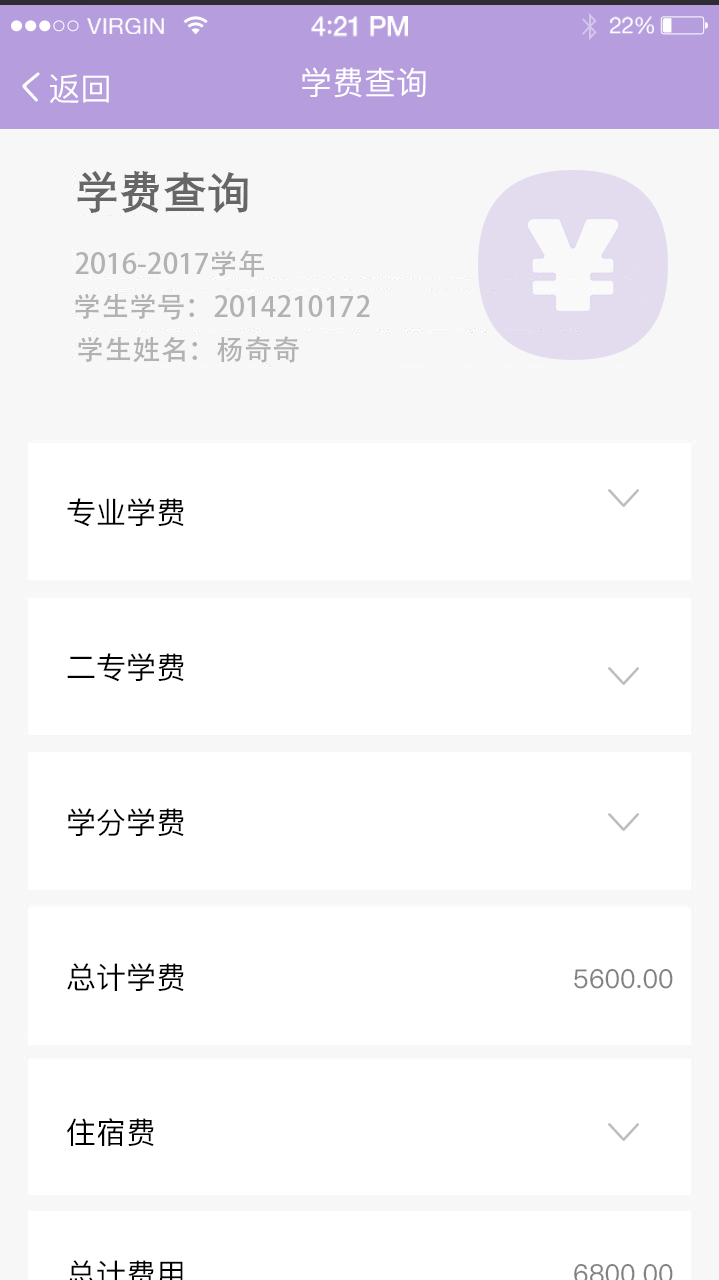
<style>
.page{position:relative;width:719px;height:1280px;background:#ffffff}
.page>*{position:absolute;margin:0}
.t1{font:27px "HelveticaNeue-Medium";letter-spacing:-0.02em;color:#ffffff}
.t2{font:27px "Avenir-Medium";letter-spacing:-0.02em;color:#ffffff}
.t3{font:22.6px "HelveticaNeue";letter-spacing:-0.02em;color:#ffffff}
.t4{font:22.5px "HelveticaNeue";letter-spacing:0.02em;color:#ffffff}
.t5{font:32px "PingFangSC-Medium";color:#ffffff}
.t6{font:44px "DengXian-Bold";color:#666666}
.t7{font:28px "AdobeHeitiStd-Regular";color:#b2b2b2}
.t8{font:30px "PingFangSC-Medium";color:#000000}
.t9{font:26px "PingFangSC-Medium";color:#818181}
</style>
<div class="page">
<p class="t1" style="left:311px;top:16px;width:97px;height:21px">4<span class="t2">:</span>21 PM</p>
<p class="t3" style="left:610px;top:16px;width:44px;height:18px">22%</p>
<p class="t4" style="left:86px;top:18px;width:78px;height:16px">VIRGIN</p>
<p class="t5" style="left:50px;top:74px;width:59px;height:30px">返回</p>
<p class="t5" style="left:302px;top:67px;width:124px;height:31px">学费查询</p>
<p class="t6" style="left:77px;top:171px;width:171px;height:42px">学费查询</p>
<p class="t7" style="left:75px;top:250px;width:190px;height:27px">2016-2017学年</p>
<p class="t7" style="left:75px;top:293px;width:295px;height:27px">学生学号：2014210172</p>
<p class="t7" style="left:78px;top:336px;width:221px;height:27px">学生姓名：杨奇奇</p>
<p class="t8" style="left:67px;top:498px;width:117px;height:29px">专业学费</p>
<p class="t8" style="left:67px;top:653px;width:117px;height:29px">二专学费</p>
<p class="t8" style="left:68px;top:808px;width:116px;height:28px">学分学费</p>
<p class="t8" style="left:67px;top:963px;width:117px;height:28px">总计学费</p>
<p class="t9" style="left:574px;top:968px;width:99px;height:21px">5600.00</p>
<p class="t8" style="left:67px;top:1118px;width:87px;height:28px">住宿费</p>
</div>
